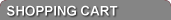
<style>
.page{position:relative;width:171px;height:20px;background:#858585}
.page>*{position:absolute;margin:0}
.t1{font:13.3px "Arial-BoldMT";color:#ffffff}
</style>
<div class="page">
<p class="t1" style="left:7px;top:5px;width:111px;height:11px">SHOPPING CART</p>
</div>
